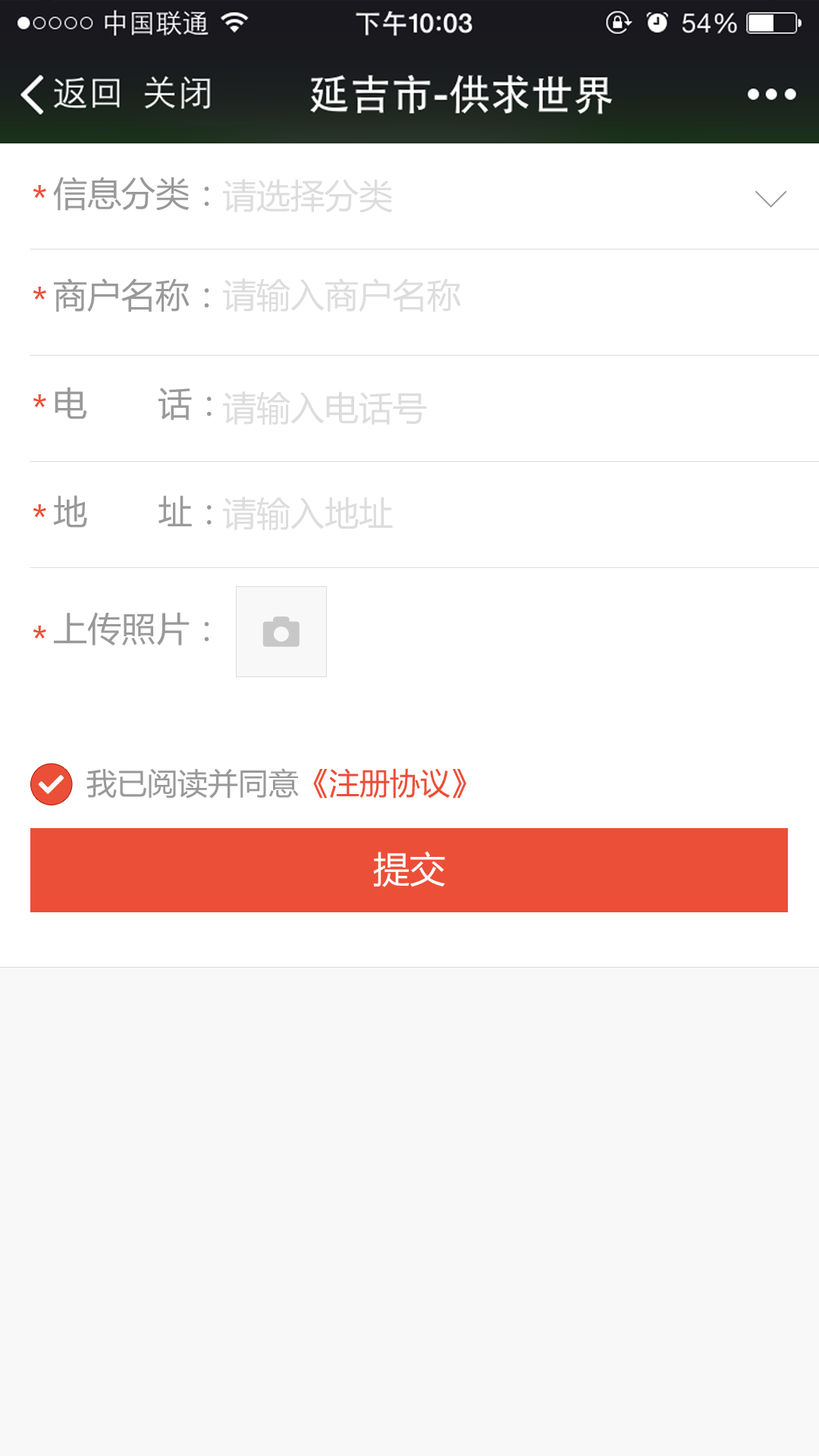
<style>
.page{position:relative;width:819px;height:1456px;background:#ffffff}
.page>*{position:absolute;margin:0}
.t1{font:34.1px "MicrosoftYaHei";color:#eb4f38}
.t2{font:34.1px/108.4px "MicrosoftYaHei";color:#999999}
.t3{font:34.1px/102.4px "MicrosoftYaHei";color:#999999}
.t4{font:34.1px/101.6px "MicrosoftYaHei";color:#999999}
.t5{font:34.1px/116.8px "MicrosoftYaHei";color:#999999}
.t6{font:34.1px "MicrosoftYaHei";color:#dddddd}
.t7{font:45.5px "NSimSun";color:#999999}
.t8{font:30.3px "MicrosoftYaHei";color:#999999}
.t9{font:30.3px "MicrosoftYaHei";color:#eb4f38}
.t10{font:36.4px "MicrosoftYaHei";color:#ffffff}
</style>
<div class="page">
<p class="t1" style="left:33px;top:185px;width:13px;height:13px">*</p>
<p class="t2" style="left:53px;top:177px;width:159px;height:469px"><span class="t3">信息分类：<br></span><span class="t4">商户名称：<br></span>电       话：<br>地       址：<br><span class="t5">上传照片：</span></p>
<p class="t6" style="left:223px;top:179px;width:170px;height:34px">请选择分类</p>
<p class="t7" style="left:755px;top:190px;width:32px;height:18px;rotate:90deg">&gt;</p>
<p class="t6" style="left:223px;top:278px;width:238px;height:34px">请输入商户名称</p>
<p class="t1" style="left:33px;top:287px;width:13px;height:13px">*</p>
<p class="t1" style="left:33px;top:394px;width:13px;height:13px">*</p>
<p class="t6" style="left:223px;top:391px;width:204px;height:34px">请输入电话号</p>
<p class="t6" style="left:223px;top:497px;width:170px;height:33px">请输入地址</p>
<p class="t1" style="left:33px;top:504px;width:13px;height:13px">*</p>
<p class="t1" style="left:33px;top:626px;width:13px;height:13px">*</p>
<p class="t8" style="left:86px;top:768px;width:380px;height:31px">我已阅读并同意<span class="t9">《注册协议》</span></p>
<p class="t10" style="left:373px;top:851px;width:72px;height:36px">提交</p>
</div>
